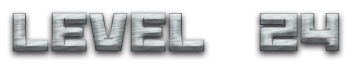
<style>
.page{position:relative;width:364px;height:64px;background:#ffffff}
.page>*{position:absolute;margin:0}
.t1{font:60px "BananaBrick"}
</style>
<div class="page">
<p class="t1" style="left:12px;top:12px;width:328px;height:40px">Level  24</p>
</div>
